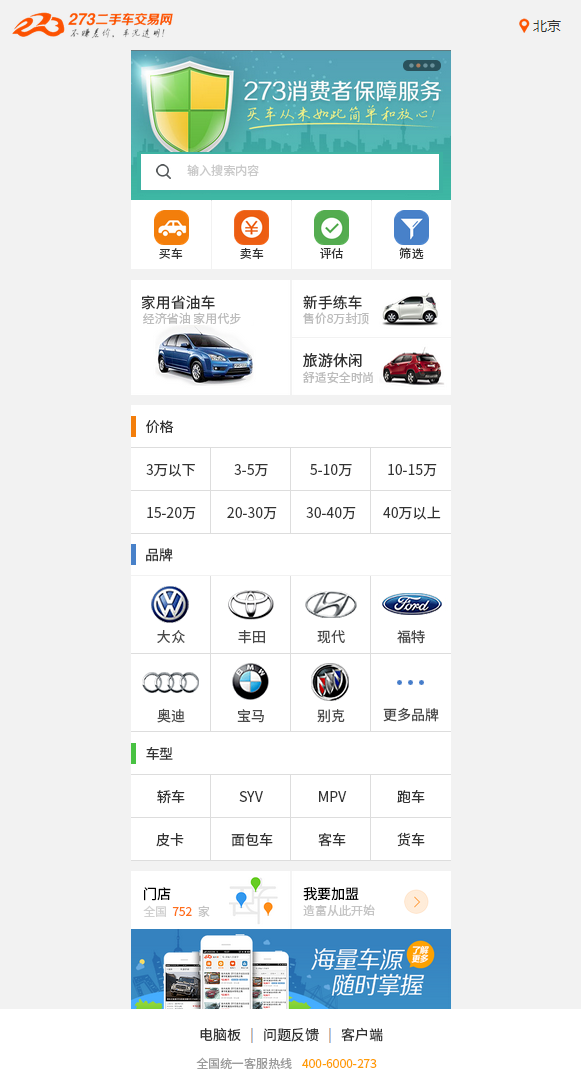
<style>
.page{position:relative;width:581px;height:1089px;background:#f2f2f2}
.page>*{position:absolute;margin:0}
.t1{font:12px "SourceHanSansCN-Regular";color:#c9c9c9}
.t2{font:12px "SourceHanSansCN-Regular";color:#333333}
.t3{font:15px "SourceHanSansCN-Regular";color:#333333}
.t4{font:12px "SourceHanSansCN-Regular";color:#bdbdbd}
.t5{font:14px "SourceHanSansCN-Regular";color:#333333}
.t6{font:14px "SourceHanSansCN-Regular";color:#494949}
.t7{font:14px "SourceHanSansCN-Regular";color:#000000}
.t8{font:12px "SourceHanSansCN-Regular";color:#ff7019}
.t9{font:12px "SourceHanSansCN-Regular";color:#d1d1d1}
.t10{font:12px "SourceHanSansCN-Regular";color:#c5c5c5}
.t11{font:14px "SourceHanSansCN-Regular";color:#323232}
.t12{font:12px "SourceHanSansCN-Regular";color:#9c9c9c}
.t13{font:12px "SourceHanSansCN-Regular";color:#ff9f07}
</style>
<div class="page">
<p class="t1" style="left:187px;top:164px;width:72px;height:13px">输入搜索内容</p>
<p class="t2" style="left:159px;top:248px;width:24px;height:11px">买车</p>
<p class="t2" style="left:240px;top:248px;width:24px;height:11px">卖车</p>
<p class="t2" style="left:320px;top:248px;width:23px;height:11px">评估</p>
<p class="t2" style="left:399px;top:247px;width:25px;height:12px">筛选</p>
<p class="t3" style="left:141px;top:295px;width:74px;height:15px">家用省油车</p>
<p class="t3" style="left:303px;top:295px;width:59px;height:15px">新手练车</p>
<p class="t4" style="left:143px;top:312px;width:98px;height:13px">经济省油 家用代步</p>
<p class="t4" style="left:303px;top:312px;width:66px;height:13px">售价8万封顶</p>
<p class="t5" style="left:146px;top:420px;width:28px;height:13px">价格</p>
<p class="t5" style="left:146px;top:464px;width:49px;height:13px">3万以下</p>
<p class="t5" style="left:234px;top:464px;width:34px;height:13px">3-5万</p>
<p class="t5" style="left:310px;top:464px;width:42px;height:13px">5-10万</p>
<p class="t5" style="left:388px;top:464px;width:49px;height:13px">10-15万</p>
<p class="t5" style="left:147px;top:507px;width:49px;height:13px">15-20万</p>
<p class="t5" style="left:227px;top:507px;width:50px;height:13px">20-30万</p>
<p class="t5" style="left:306px;top:507px;width:50px;height:13px">30-40万</p>
<p class="t5" style="left:383px;top:506px;width:58px;height:14px">40万以上</p>
<p class="t5" style="left:146px;top:548px;width:27px;height:14px">品牌</p>
<p class="t6" style="left:157px;top:630px;width:28px;height:13px">大众</p>
<p class="t6" style="left:238px;top:630px;width:27px;height:14px">丰田</p>
<p class="t6" style="left:317px;top:630px;width:28px;height:14px">现代</p>
<p class="t6" style="left:397px;top:630px;width:28px;height:14px">福特</p>
<p class="t6" style="left:157px;top:708px;width:28px;height:15px">奥迪</p>
<p class="t6" style="left:237px;top:709px;width:27px;height:14px">宝马</p>
<p class="t6" style="left:317px;top:709px;width:28px;height:14px">别克</p>
<p class="t6" style="left:383px;top:707px;width:56px;height:15px">更多品牌</p>
<p class="t5" style="left:146px;top:747px;width:27px;height:13px">车型</p>
<p class="t5" style="left:157px;top:790px;width:28px;height:14px">轿车</p>
<p class="t5" style="left:239px;top:791px;width:24px;height:11px">SYV</p>
<p class="t5" style="left:319px;top:791px;width:28px;height:11px">MPV</p>
<p class="t5" style="left:397px;top:790px;width:28px;height:13px">跑车</p>
<p class="t5" style="left:156px;top:833px;width:28px;height:14px">皮卡</p>
<p class="t5" style="left:231px;top:833px;width:42px;height:14px">面包车</p>
<p class="t5" style="left:318px;top:833px;width:28px;height:14px">客车</p>
<p class="t5" style="left:397px;top:832px;width:28px;height:15px">货车</p>
<p class="t7" style="left:144px;top:887px;width:27px;height:14px">门店</p>
<p class="t7" style="left:303px;top:887px;width:56px;height:14px">我要加盟</p>
<p class="t8" style="left:143px;top:905px;width:67px;height:12px"><span class="t9">全国  </span>752  <span class="t10">家</span></p>
<p class="t10" style="left:303px;top:904px;width:72px;height:12px">造富从此开始</p>
<p class="t11" style="left:200px;top:1027px;width:41px;height:14px">电脑板</p>
<p class="t11" style="left:264px;top:1028px;width:55px;height:14px">问题反馈</p>
<p class="t11" style="left:341px;top:1027px;width:42px;height:15px">客户端</p>
<p class="t12" style="left:196px;top:1057px;width:96px;height:13px">全国统一客服热线</p>
<p class="t13" style="left:302px;top:1059px;width:75px;height:9px">400-6000-273</p>
</div>
